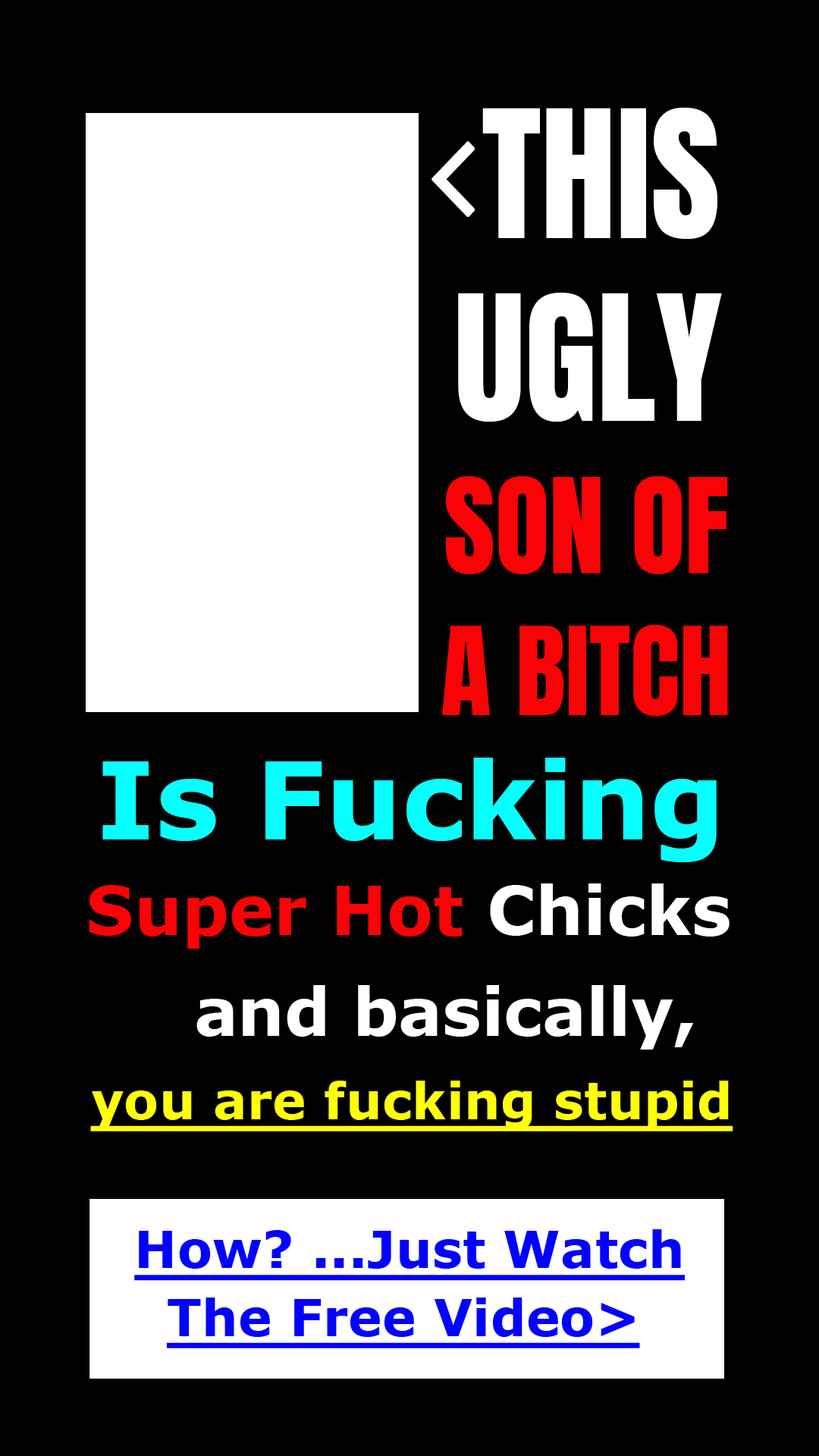
<style>
.page{position:relative;width:819px;height:1456px;background:#000000}
.page>*{position:absolute;margin:0}
.t1{font:150.9px "Anton-Regular";color:#ffffff}
.t2{font:148.7px "Anton-Regular";color:#ffffff}
.t3{font:111.4px "Anton-Regular";color:#fb0206}
.t4{font:104.2px "Anton-Regular";color:#fb0206}
.t5{font:107.3px "Verdana-Bold";color:#08ffff}
.t6{font:67.4px "Verdana-Bold";color:#fb0206}
.t7{font:67.4px "Verdana-Bold";color:#ffffff}
.t8{font:65.6px "Verdana-Bold";color:#ffffff}
.t9{font:51.1px "Verdana-Bold";color:#fffe0b;text-decoration:underline}
.t10{font:51.1px "Verdana-Bold";color:#0302fe;text-decoration:underline}
</style>
<div class="page">
<p class="t1" style="left:482px;top:107px;width:235px;height:132px">THIS</p>
<p class="t2" style="left:458px;top:292px;width:264px;height:130px">UGLY</p>
<p class="t3" style="left:446px;top:475px;width:282px;height:99px">SON OF</p>
<p class="t4" style="left:442px;top:625px;width:286px;height:91px">A BITCH</p>
<p class="t5" style="left:102px;top:758px;width:615px;height:104px">Is Fucking</p>
<p class="t6" style="left:89px;top:883px;width:641px;height:66px">Super Hot <span class="t7">Chicks</span></p>
<p class="t8" style="left:196px;top:985px;width:498px;height:65px">and basically,</p>
<p class="t9" style="left:90px;top:1081px;width:643px;height:50px">you are fucking stupid</p>
<p class="t10" style="left:134px;top:1229px;width:551px;height:52px">How? ...Just Watch</p>
<p class="t10" style="left:167px;top:1297px;width:473px;height:51px">The Free Video&gt;</p>
</div>
